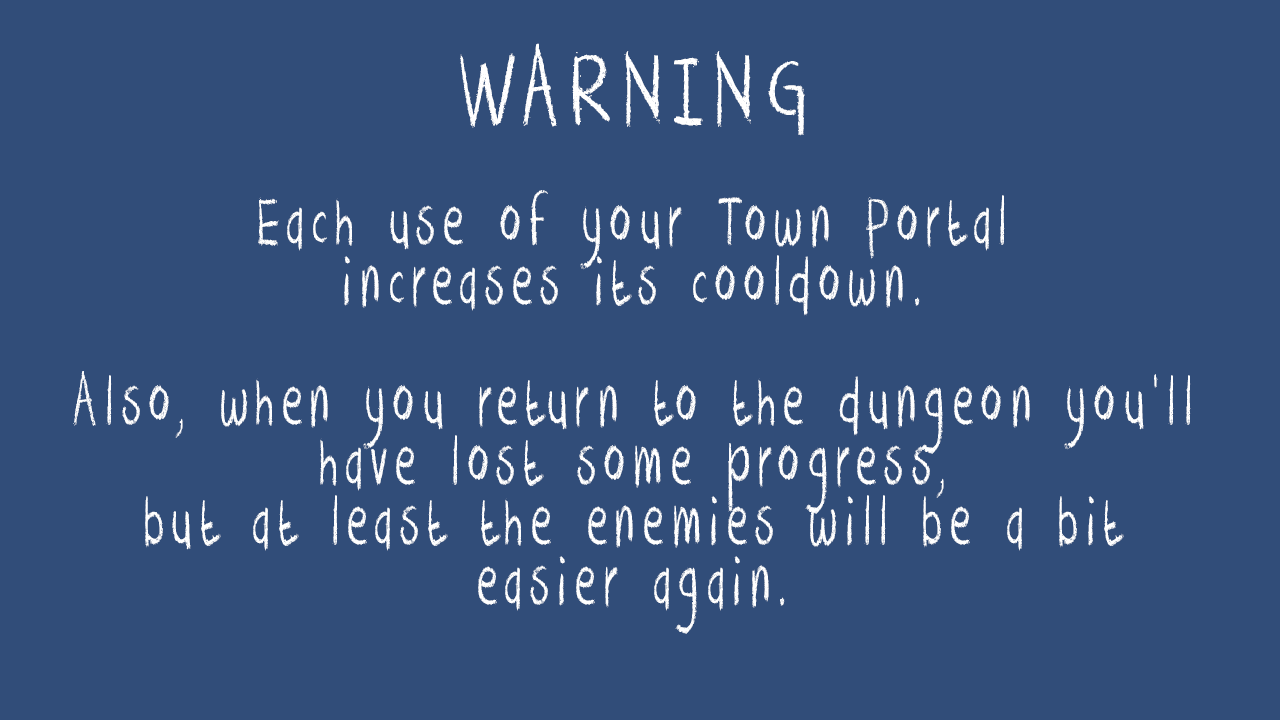
<style>
.page{position:relative;width:1280px;height:720px;background:#314d79}
.page>*{position:absolute;margin:0}
.t1{font:78.5px "DKCrayonCrumble";letter-spacing:0.159em;color:#ffffff;scale:0.64 1}
.t2{font:117.8px "DKCrayonCrumble";letter-spacing:0.159em;color:#ffffff;scale:0.64 1}
</style>
<div class="page">
<p class="t1" style="left:73px;top:43px;width:1118px;height:591px;text-align:center"><span class="t2">WARNING<br></span><br>Each use of your Town Portal<br>increases its cooldown.<br><br>Also, when you return to the dungeon you’ll have lost some progress,<br>but at least the enemies will be a bit easier again.</p>
</div>
